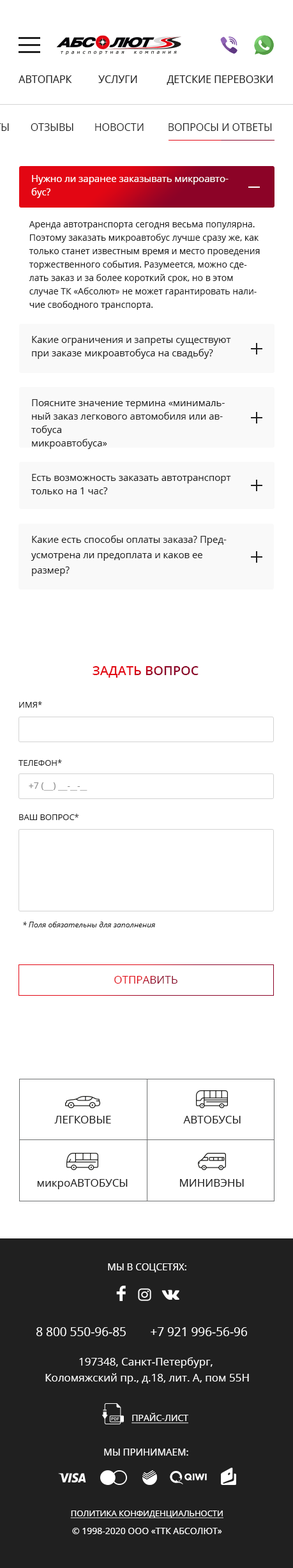
<style>
.page{position:relative;width:293px;height:1568px;background:#ffffff}
.page>*{position:absolute;margin:0}
.t1{font:10.2px "OpenSans-Regular";color:#202020;text-transform:uppercase}
.t2{font:9.6px/13.4px "OpenSans-Regular";color:#ffffff}
.t3{font:8.9px/13.4px "OpenSans-Regular";color:#202020}
.t4{font:8.9px/13.4px "OpenSans-Regular";color:#cd0518}
.t5{font:9.6px/13.4px "OpenSans-Regular";color:#202020}
.t6{font:9.6px/15.3px "OpenSans-Regular";color:#202020}
.t7{font:12.8px "OpenSans-SemiBold";text-transform:uppercase}
.t8{font:8.3px "OpenSans-Regular";color:#202020;text-transform:uppercase}
.t9{font:8.9px "OpenSans-Regular";color:#8b8b8b;text-transform:uppercase}
.t10{font:7.7px "OpenSans-Italic";color:#202020}
.t11{font:10.9px "OpenSans-Regular";text-transform:uppercase}
</style>
<div class="page">
<p class="t1" style="left:31px;top:123px;width:42px;height:8px">отзывы</p>
<p class="t1" style="left:95px;top:123px;width:49px;height:8px">новости</p>
<p class="t1" style="left:169px;top:123px;width:103px;height:8px">вопросы и ответы</p>
<p class="t2" style="left:31px;top:175px;width:198px;height:23px">Нужно ли заранее заказывать микроавтобус?</p>
<p class="t3" style="left:29px;top:221px;width:231px;height:89px">Аренда автотранспорта сегодня весьма популярна. Поэтому заказать микроавтобус лучше сразу же, как только станет известным время и место проведения торжественного события. Разумеется, можно сделать заказ и за более короткий срок, но в этом случае ТК «Абсолют» не может гарантировать наличие свободного транспорта.<br><span class="t4"></span></p>
<p class="t5" style="left:32px;top:336px;width:199px;height:23px">Какие ограничения и запреты существуют при заказе микроавтобуса на свадьбу?</p>
<p class="t5" style="left:31px;top:399px;width:194px;height:50px">Поясните значение термина «минимальный заказ легкового автомобиля или автобуса<br>микроавтобуса»</p>
<p class="t5" style="left:31px;top:474px;width:200px;height:20px">Есть возможность заказать автотранспорт только на 1 час?</p>
<p class="t6" style="left:31px;top:535px;width:196px;height:41px">Какие есть способы оплаты заказа? Предусмотрена ли предоплата и каков ее размер?</p>
<p class="t7" style="left:93px;top:666px;width:106px;height:12px">задать вопрос</p>
<p class="t8" style="left:19px;top:701px;width:23px;height:7px">имя*</p>
<p class="t8" style="left:19px;top:759px;width:43px;height:7px">телефон*</p>
<p class="t9" style="left:29px;top:782px;width:59px;height:9px">+7 (    )     -   -</p>
<p class="t8" style="left:19px;top:814px;width:60px;height:6px">ваш вопрос*</p>
<p class="t10" style="left:23px;top:922px;width:132px;height:5px">* Поля обязательны для заполнения</p>
<p class="t11" style="left:114px;top:976px;width:64px;height:8px">отправить</p>
</div>
